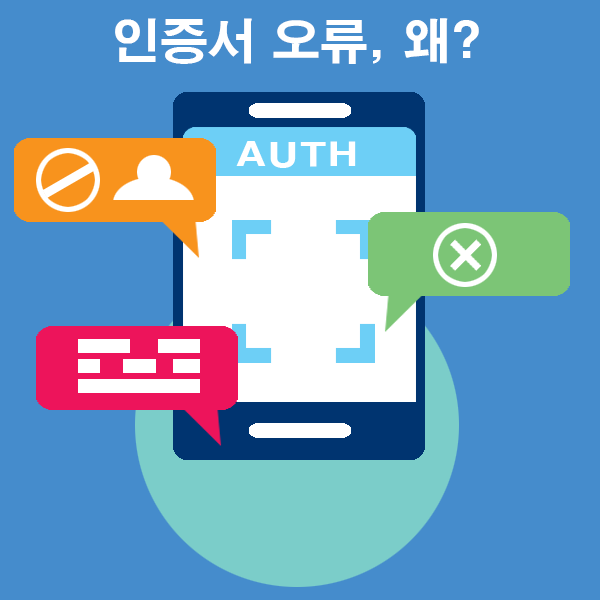
<style>
.page{position:relative;width:600px;height:600px;background:#458ccc}
.page>*{position:absolute;margin:0}
.t1{font:48px "H2gtrE";color:#ffffff}
.t2{font:32.8px "H2gtrE";color:#ffffff;scale:1.23 1}
</style>
<div class="page">
<p class="t1" style="left:115px;top:18px;width:364px;height:46px">인증서 오류, 왜?</p>
<p class="t2" style="left:236px;top:141px;width:120px;height:27px">AUTH</p>
</div>
